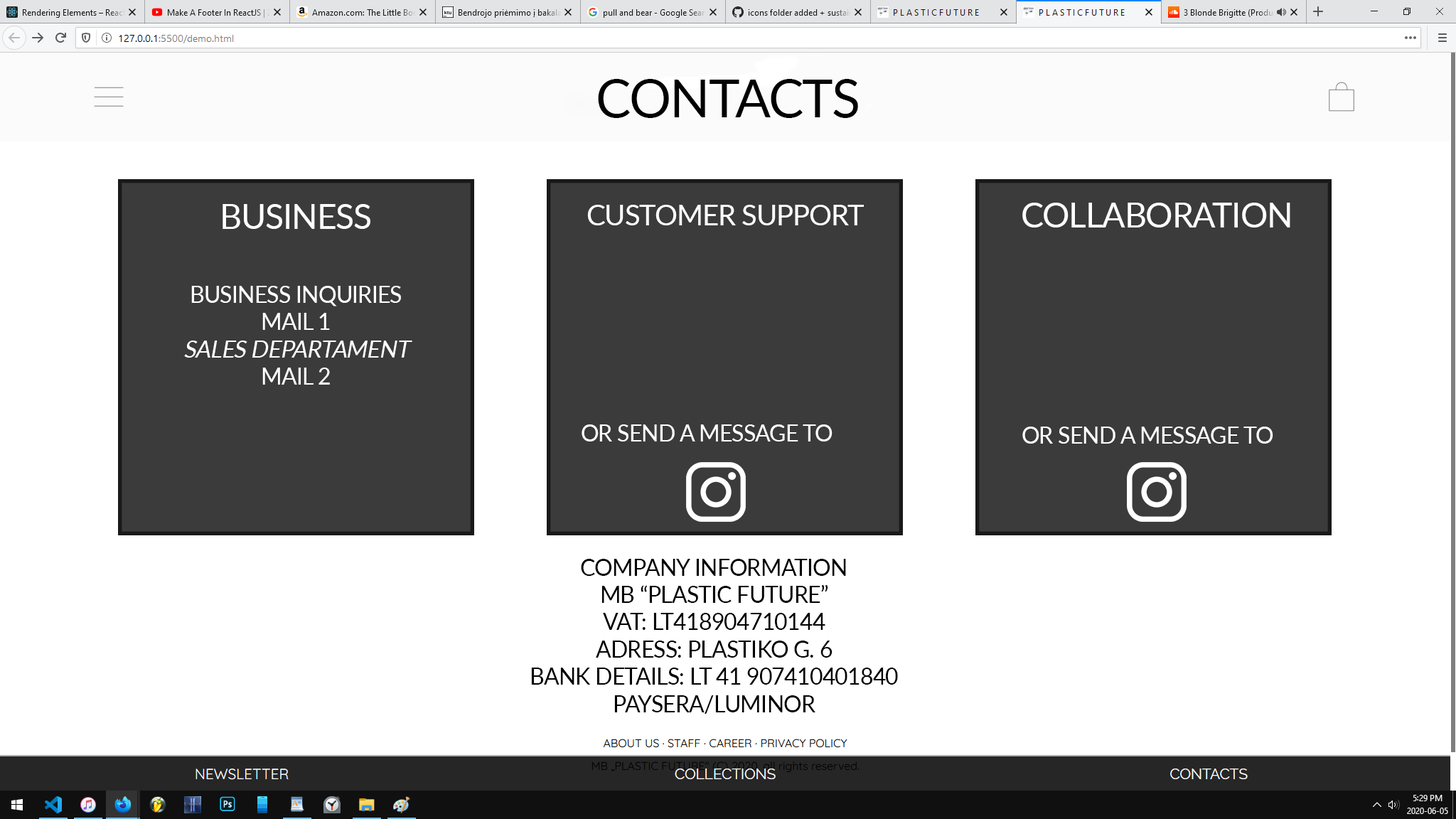
<style>
.page{position:relative;width:1456px;height:819px;background:#ffffff}
.page>*{position:absolute;margin:0}
.t1{font:52.7px "Lato-Regular";letter-spacing:-0.025em;color:#010101;text-transform:uppercase}
.t2{font:34.1px "Lato-Regular";letter-spacing:-0.025em;color:#ffffff;text-transform:uppercase}
.t3{font:28.4px "Lato-Regular";letter-spacing:-0.025em;color:#ffffff;text-transform:uppercase}
.t4{font:22.7px "Lato-Regular";letter-spacing:-0.025em;color:#ffffff;text-transform:uppercase}
.t5{font:22.7px "Lato-Regular";letter-spacing:-0.025em;color:#ffffff;text-transform:uppercase;font-style:italic}
.t6{font:22.7px "Lato-Regular";letter-spacing:-0.025em;color:#000000;text-transform:uppercase}
</style>
<div class="page">
<p class="t1" style="left:598px;top:79px;width:260px;height:39px">contacts</p>
<p class="t2" style="left:223px;top:204px;width:147px;height:25px">BUSINESS</p>
<p class="t3" style="left:587px;top:205px;width:277px;height:20px">customer support</p>
<p class="t2" style="left:1022px;top:203px;width:268px;height:24px">COLLABORATION</p>
<p class="t4" style="left:184px;top:286px;width:228px;height:99px;text-align:center">BUSINESS INQUIRIES<br>mail 1<br><span class="t5">sales departament<br></span>mail 2</p>
<p class="t4" style="left:582px;top:424px;width:250px;height:17px">or send a message to</p>
<p class="t4" style="left:1022px;top:427px;width:251px;height:17px">or send a message to</p>
<p class="t6" style="left:531px;top:559px;width:367px;height:155px;text-align:center">company information<br>mb “plastic future”<br>vat: lt418904710144<br>adress: plastiko g. 6<br>bank details: lt 41 907410401840<br>paysera/luminor</p>
</div>
